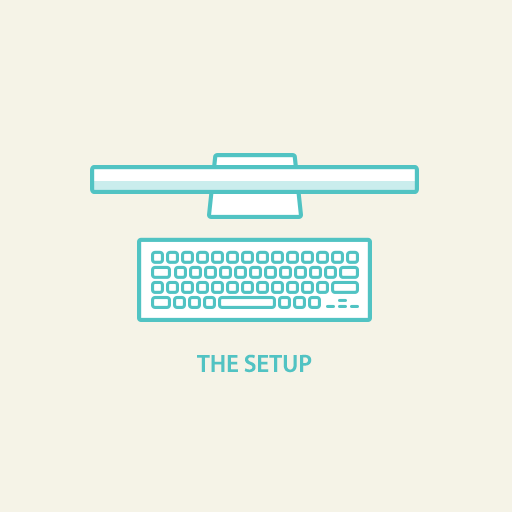
<style>
.page{position:relative;width:512px;height:512px;background:#f5f3e7}
.page>*{position:absolute;margin:0}
.t1{font:24.8px "MyriadPro-Semibold";color:#51c3c3;text-transform:uppercase}
</style>
<div class="page">
<p class="t1" style="left:197px;top:354px;width:115px;height:19px">The Setup</p>
</div>
